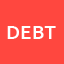
<style>
.page{position:relative;width:64px;height:64px;background:#ff473f}
.page>*{position:absolute;margin:0}
.t1{font:20.3px "Corbel-Bold";color:#ffffff}
</style>
<div class="page">
<p class="t1" style="left:7px;top:26px;width:49px;height:13px">DEBT</p>
</div>
